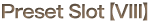
<style>
.page{position:relative;width:150px;height:23px;background:#ffffff}
.page>*{position:absolute;margin:0}
.t1{font:18px "GothicMB101Pro-DeBold";letter-spacing:-0.04em}
.t2{font:18px "GothicMB101Pro-DeBold";letter-spacing:-0.04em;color:#8b6e51}
</style>
<div class="page">
<p class="t1" style="left:2px;top:2px;width:146px;height:19px">Preset Slot【     】</p>
<p class="t2" style="left:114px;top:4px;width:28px;height:15px;opacity:0.9">VIII</p>
</div>
